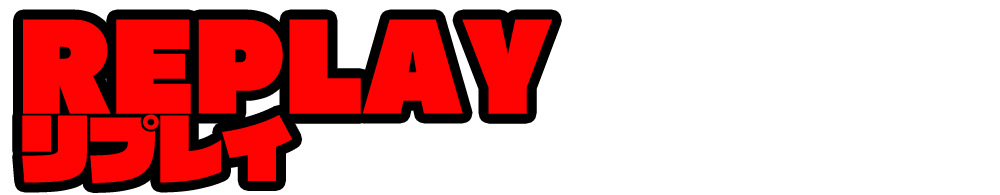
<style>
.page{position:relative;width:1000px;height:195px;background:#ffffff}
.page>*{position:absolute;margin:0}
.t1{font:112.5px "RaglanPunchStd-UB";color:#ff0202}
.t2{font:70.8px "RaglanPunchStd-UB";color:#ff0202}
</style>
<div class="page">
<p class="t1" style="left:23px;top:19px;width:529px;height:95px">REPLAY</p>
<p class="t2" style="left:22px;top:114px;width:271px;height:69px">リプレイ</p>
</div>
